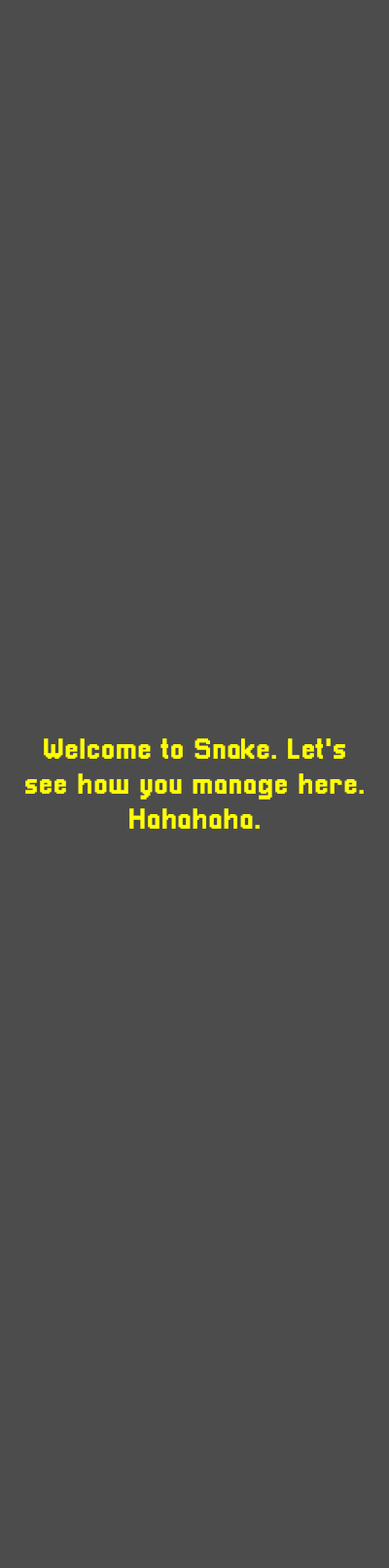
<style>
.page{position:relative;width:389px;height:1568px;background:#4c4c4c}
.page>*{position:absolute;margin:0}
.t1{font:29.1px "Pixellari";color:#ffff00}
</style>
<div class="page">
<p class="t1" style="left:25px;top:738px;width:338px;height:91px;text-align:center">Welcome to Snake. Let's<br>see how you manage here.<br>Hahahaha.</p>
</div>
